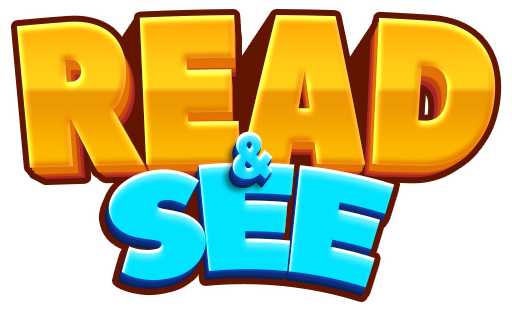
<style>
.page{position:relative;width:512px;height:310px;background:#ffffff}
.page>*{position:absolute;margin:0}
.t1{font:201.8px "PeaceSans";letter-spacing:-0.025em;scale:0.83 1}
.t2{font:199.7px "PeaceSans";letter-spacing:-0.025em;scale:0.83 1}
.t3{font:197.7px "PeaceSans";letter-spacing:-0.025em;scale:0.83 1}
.t4{font:195.8px "PeaceSans";letter-spacing:-0.025em;scale:0.83 1}
.t5{font:193.8px "PeaceSans";letter-spacing:-0.025em;scale:0.83 1}
.t6{font:191.9px "PeaceSans";letter-spacing:-0.025em;scale:0.83 1}
.t7{font:189.9px "PeaceSans";letter-spacing:-0.025em;scale:0.83 1}
.t8{font:188px "PeaceSans";letter-spacing:-0.025em;scale:0.83 1}
.t9{font:64.2px "PeaceSans";scale:0.91 1}
.t10{font:151.7px "PeaceSans";letter-spacing:-0.075em;color:#02e3fd;scale:0.77 1}
</style>
<div class="page">
<p class="t1" style="left:16px;top:15px;width:480px;height:153px">READ</p>
<p class="t2" style="left:19px;top:19px;width:474px;height:152px">READ</p>
<p class="t3" style="left:21px;top:23px;width:470px;height:151px">READ</p>
<p class="t4" style="left:23px;top:26px;width:465px;height:149px">READ</p>
<p class="t5" style="left:26px;top:29px;width:460px;height:147px">READ</p>
<p class="t6" style="left:28px;top:31px;width:456px;height:146px">READ</p>
<p class="t7" style="left:30px;top:34px;width:452px;height:144px">READ</p>
<p class="t8" style="left:33px;top:36px;width:446px;height:144px">READ</p>
<p class="t9" style="left:232px;top:131px;width:41px;height:48px">&amp;</p>
<p class="t10" style="left:108px;top:162px;width:287px;height:126px">SEE</p>
</div>
